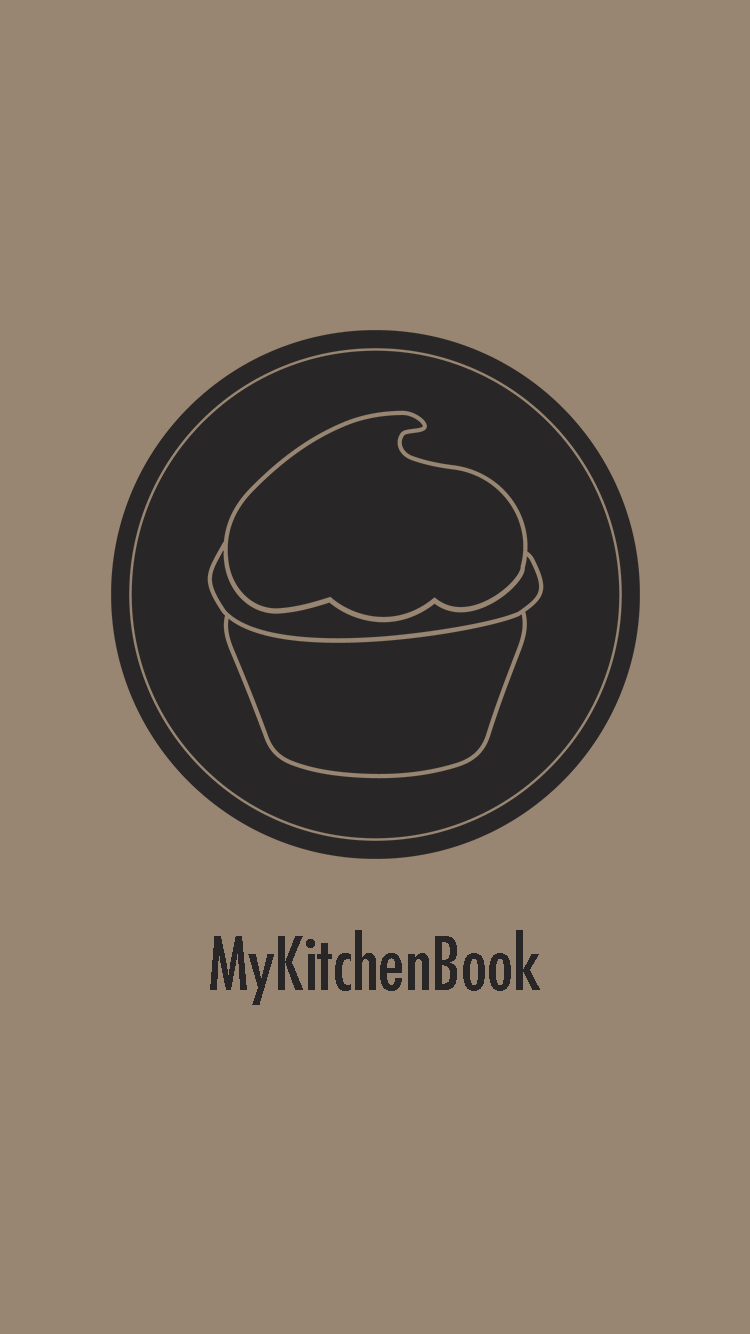
<style>
.page{position:relative;width:750px;height:1334px;background:#988672}
.page>*{position:absolute;margin:0}
.t1{font:72px "Futura-CondensedMedium";color:#282626}
</style>
<div class="page">
<p class="t1" style="left:210px;top:930px;width:330px;height:75px">MyKitchenBook</p>
</div>
